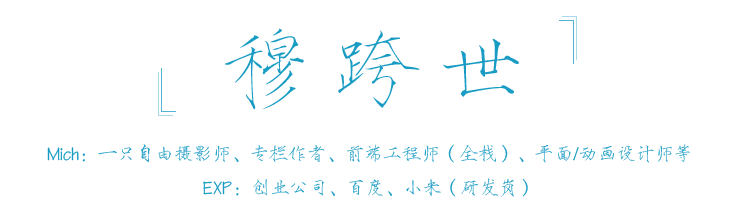
<style>
.page{position:relative;width:750px;height:200px;background:#ffffff}
.page>*{position:absolute;margin:0}
.t1{font:90px "FZSJSJW--GB1-0";letter-spacing:0.2em;color:#199cc4}
.t2{font:19px "FZSJSJW--GB1-0";color:#199cc4}
.t3{font:19px "FZSJSJW--GB1-0";letter-spacing:0.06em;color:#199cc4}
</style>
<div class="page">
<p class="t1" style="left:224px;top:28px;width:295px;height:82px">穆跨世</p>
<p class="t2" style="left:47px;top:144px;width:643px;height:53px;text-align:center">Mich：一只自由摄影师、专栏作者、前端工程师（全栈）、平面/动画设计师等<br><span class="t3">EXP</span>：创业公司、百度、小米（研发岗）</p>
</div>
